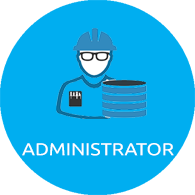
<style>
.page{position:relative;width:195px;height:195px;background:#00aef0}
.page>*{position:absolute;margin:0}
.t1{font:17.2px "Ubuntu";color:#ffffff;scale:1.13 1}
</style>
<div class="page">
<p class="t1" style="left:22px;top:143px;width:152px;height:13px">ADMINISTRATOR</p>
</div>
